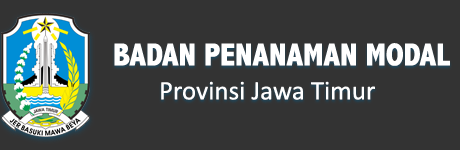
<style>
.page{position:relative;width:460px;height:150px;background:#333333}
.page>*{position:absolute;margin:0}
.t1{font:32px "AbadiMT-CondensedExtraBold";color:#ffffff}
.t2{font:27px "Calibri";color:#ffffff}
</style>
<div class="page">
<p class="t1" style="left:114px;top:43px;width:336px;height:23px">BADAN PENANAMAN MODAL</p>
<p class="t2" style="left:161px;top:81px;width:214px;height:19px">Provinsi Jawa Timur</p>
</div>
